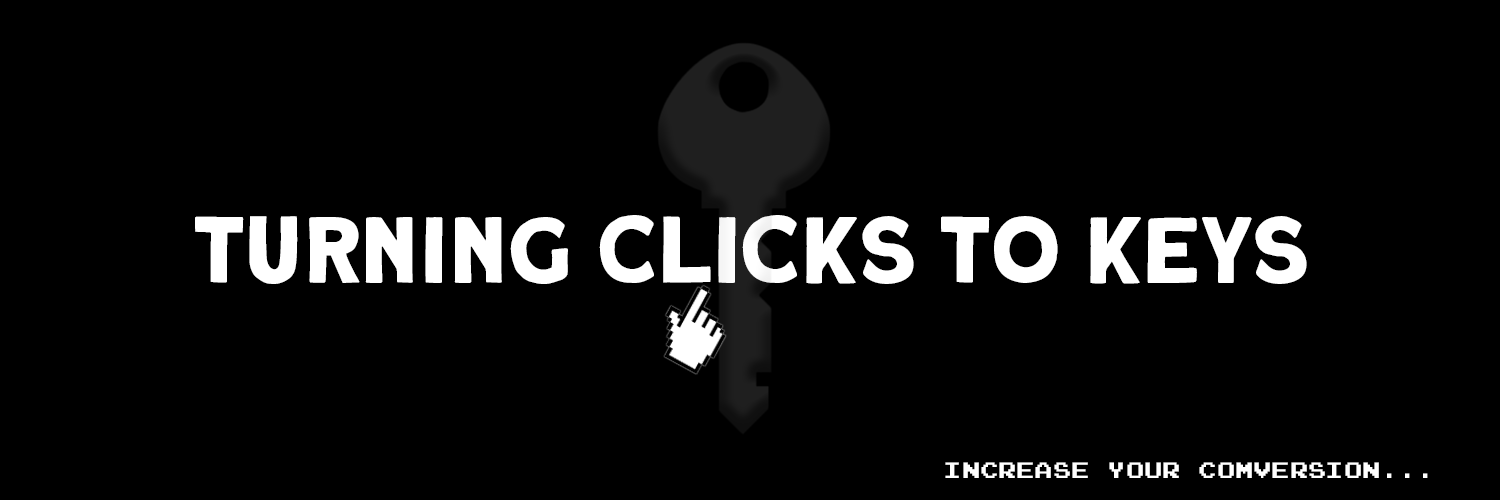
<style>
.page{position:relative;width:1500px;height:500px;background:#000000}
.page>*{position:absolute;margin:0}
.t1{font:88.2px "RoquenDEMO";color:#ffffff}
.t2{font:22px "JoystixMonospace-Regular";color:#ffffff}
</style>
<div class="page">
<p class="t1" style="left:195px;top:215px;width:1112px;height:69px">TURNING CLICKS TO KEYS</p>
<p class="t2" style="left:945px;top:462px;width:483px;height:16px">INcrease your comversion...</p>
</div>
